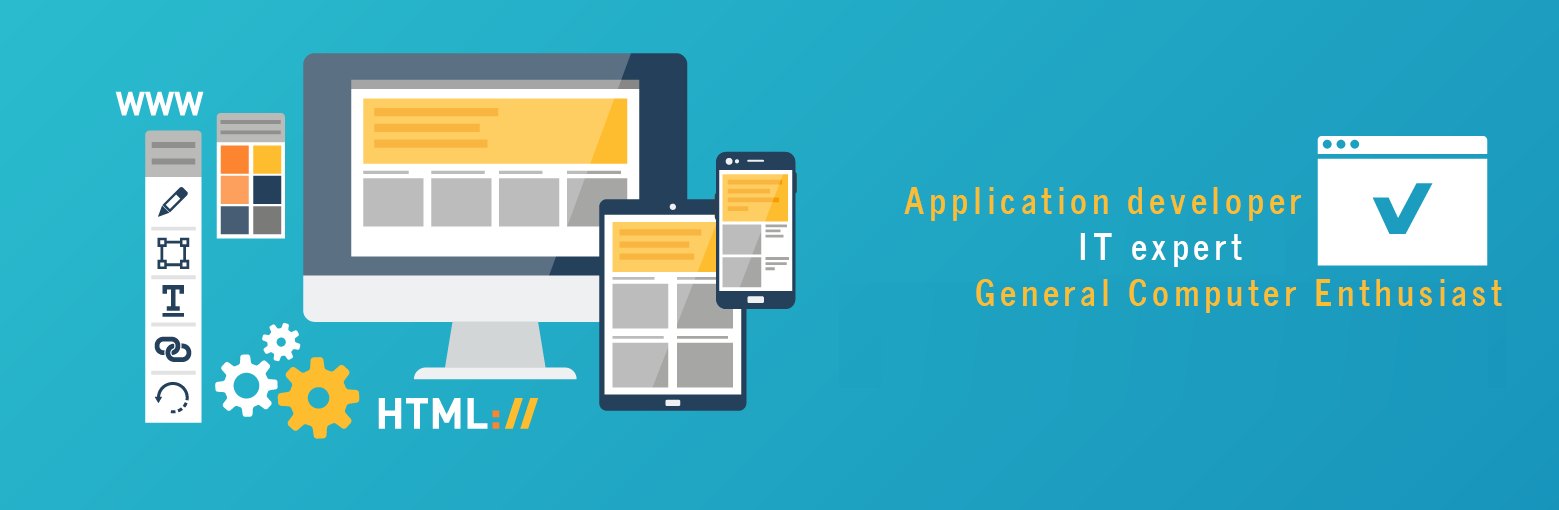
<style>
.page{position:relative;width:1559px;height:510px}
.page>*{position:absolute;margin:0}
.t1{font:36px "QuickTypeCondensed-Bold";letter-spacing:0.13em;color:#fdbd2f}
.t2{font:36px "QuickTypeCondensed-Bold";letter-spacing:0.13em;color:#ffffff}
</style>
<div class="page">
<p class="t1" style="left:904px;top:187px;width:397px;height:34px">Application developer</p>
<p class="t2" style="left:1080px;top:233px;width:162px;height:34px">IT expert</p>
<p class="t1" style="left:976px;top:279px;width:526px;height:34px">General Computer Enthusiast</p>
</div>
